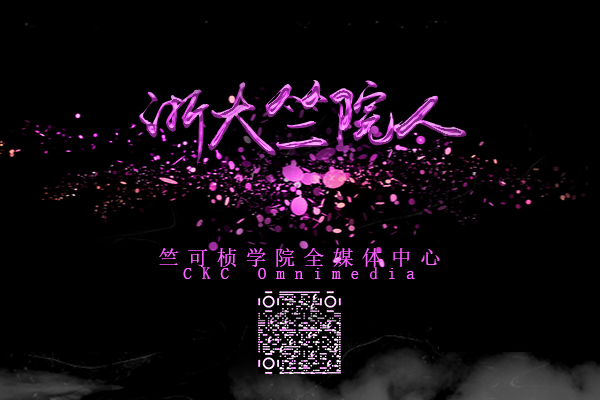
<style>
.page{position:relative;width:600px;height:400px;background:#000000}
.page>*{position:absolute;margin:0}
.t1{font:20.8px "SimSun";letter-spacing:0.395em;color:#f66cfb}
.t2{font:16.7px "SimSun";letter-spacing:0.615em;color:#f96efe}
</style>
<div class="page">
<p class="t1" style="left:159px;top:248px;width:281px;height:19px">竺可桢学院全媒体中心</p>
<p class="t2" style="left:183px;top:267px;width:232px;height:13px">CKC Omnimedia</p>
</div>
